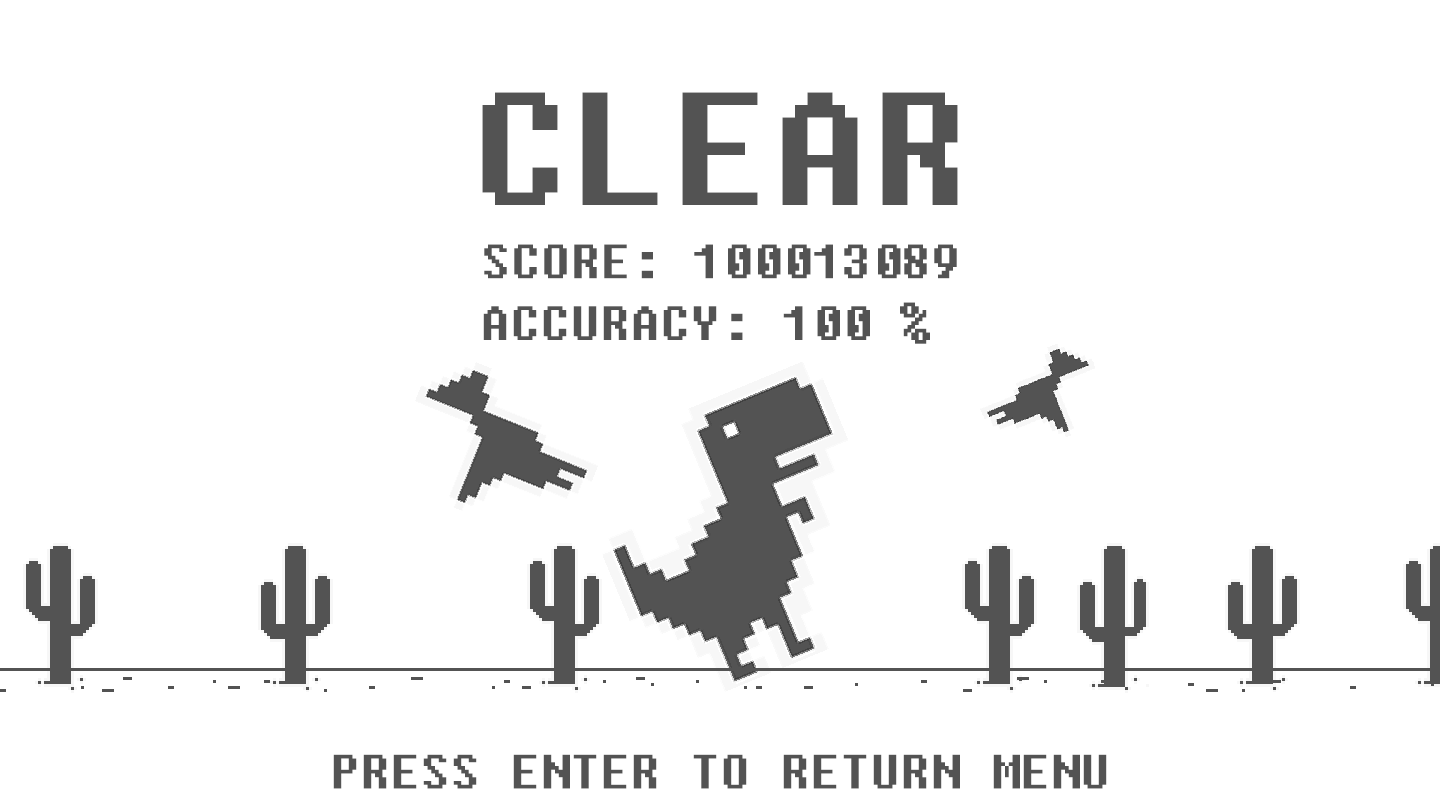
<style>
.page{position:relative;width:1440px;height:810px;background:#ffffff}
.page>*{position:absolute;margin:0}
.t1{font:200px "Fixedsys";color:#535353}
.t2{font:60px "Fixedsys";color:#535353}
</style>
<div class="page">
<p class="t1" style="left:482px;top:92px;width:476px;height:113px">CLEAR</p>
<p class="t2" style="left:484px;top:244px;width:473px;height:35px">SCORE: 100013089</p>
<p class="t2" style="left:483px;top:302px;width:447px;height:42px">ACCURACY: 100 %</p>
<p class="t2" style="left:333px;top:754px;width:774px;height:35px">PRESS ENTER TO RETURN MENU</p>
</div>
